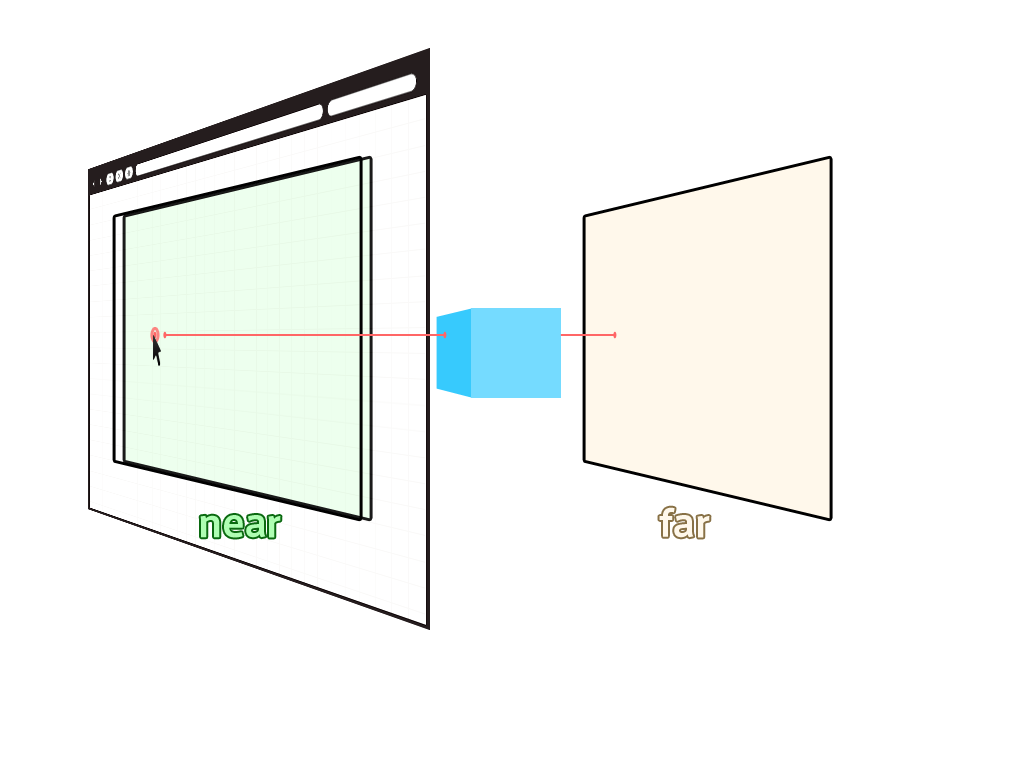
<style>
.page{position:relative;width:1024px;height:768px;background:#ffffff}
.page>*{position:absolute;margin:0}
.t1{font:36px "AxisStd-Bold";color:#fff8eb}
.t2{font:36px "AxisStd-Bold";color:#affeb3}
</style>
<div class="page">
<p class="t1" style="left:659px;top:507px;width:51px;height:31px">far</p>
<p class="t2" style="left:200px;top:515px;width:81px;height:23px">near</p>
</div>
